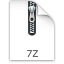
<style>
.page{position:relative;width:64px;height:64px;background:#ffffff}
.page>*{position:absolute;margin:0}
.t1{font:10px "SFProDisplay-Regular";color:#676767}
</style>
<div class="page">
<p class="t1" style="left:27px;top:50px;width:12px;height:7px">7Z</p>
</div>
